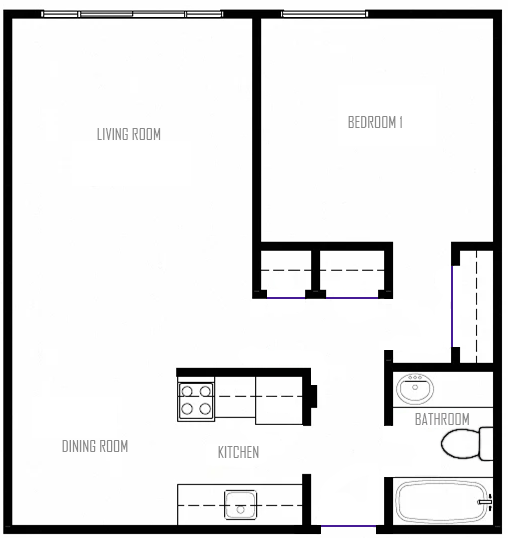
<style>
.page{position:relative;width:508px;height:538px;background:#fefefe}
.page>*{position:absolute;margin:0}
.t1{font:16px "AgencyFB-Reg";color:#8a8a8a}
</style>
<div class="page">
<p class="t1" style="left:348px;top:116px;width:54px;height:12px">BEDROOM 1</p>
<p class="t1" style="left:97px;top:128px;width:64px;height:12px">LIVING ROOM</p>
<p class="t1" style="left:415px;top:413px;width:54px;height:12px">BATHROOM</p>
<p class="t1" style="left:62px;top:440px;width:66px;height:12px">DINING ROOM</p>
<p class="t1" style="left:218px;top:446px;width:41px;height:12px">KITCHEN</p>
</div>
